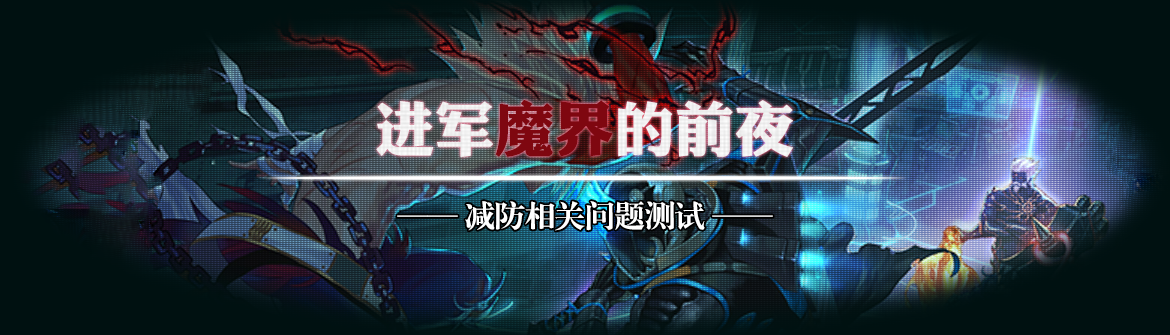
<style>
.page{position:relative;width:1170px;height:335px}
.page>*{position:absolute;margin:0}
.t1{font:60px "DFPLiJinHeiW8";color:#ffffff;text-transform:uppercase}
.t2{font:60px "DFPLiJinHeiW8";color:#7f0710;text-transform:uppercase}
.t3{font:30px "CTBiaoSongSJ";color:#ffffff;text-transform:uppercase}
</style>
<div class="page">
<p class="t1" style="left:376px;top:99px;width:417px;height:58px">进军<span class="t2">魔界</span>的前夜</p>
<p class="t3" style="left:397px;top:201px;width:376px;height:30px">—— 减防相关问题测试 ——</p>
</div>
